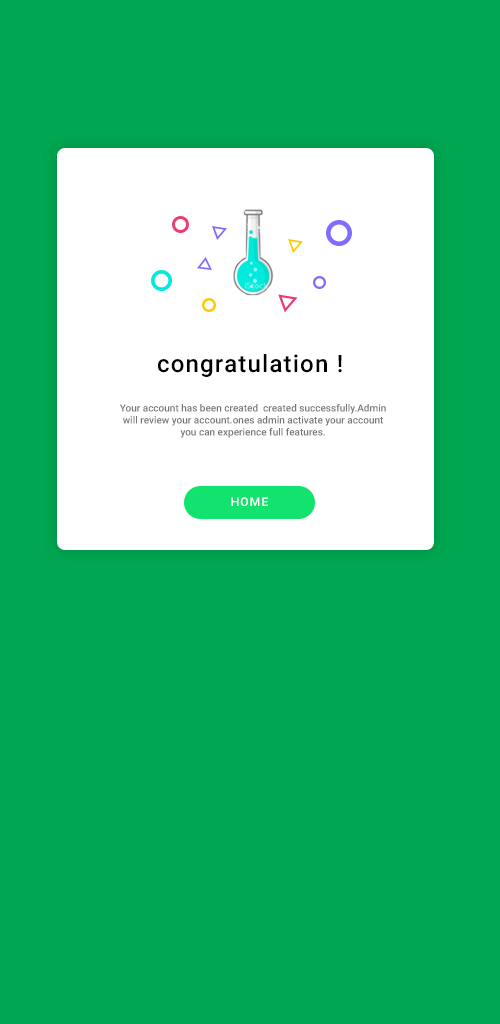
<style>
.page{position:relative;width:500px;height:1024px;background:#00a651}
.page>*{position:absolute;margin:0}
.t1{font:24px "Roboto-Medium";letter-spacing:0.05em;color:#000000}
.t2{font:10px "Roboto-Medium";color:#767676}
.t3{font:12px "Roboto-Medium";letter-spacing:0.1em;color:#ffffff}
</style>
<div class="page">
<p class="t1" style="left:158px;top:354px;width:184px;height:23px">congratulation !</p>
<p class="t2" style="left:120px;top:404px;width:266px;height:34px;text-align:center">Your account has been created  created successfully.Admin will review your account.ones admin activate your account you can experience full features.</p>
<p class="t3" style="left:231px;top:497px;width:37px;height:9px">HOME</p>
</div>
